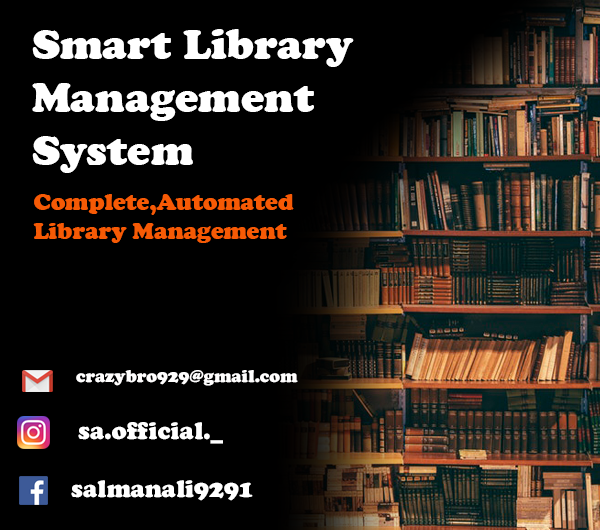
<style>
.page{position:relative;width:600px;height:530px;background:#000000}
.page>*{position:absolute;margin:0}
.t1{font:44px "CooperBlack";color:#ffffff}
.t2{font:24px "CooperBlack";color:#f65a05}
.t3{font:17.8px "CooperBlack";color:#fffefe}
.t4{font:25.2px "CooperBlack";color:#ffffff}
</style>
<div class="page">
<p class="t1" style="left:32px;top:29px;width:322px;height:144px">Smart Library <br>Management System</p>
<p class="t2" style="left:33px;top:194px;width:261px;height:49px">Complete,Automated Library Management System</p>
<p class="t3" style="left:76px;top:370px;width:222px;height:16px">crazybro929@gmail.com</p>
<p class="t4" style="left:78px;top:422px;width:145px;height:22px">sa.official._</p>
<p class="t4" style="left:71px;top:480px;width:182px;height:21px">salmanali9291</p>
</div>
